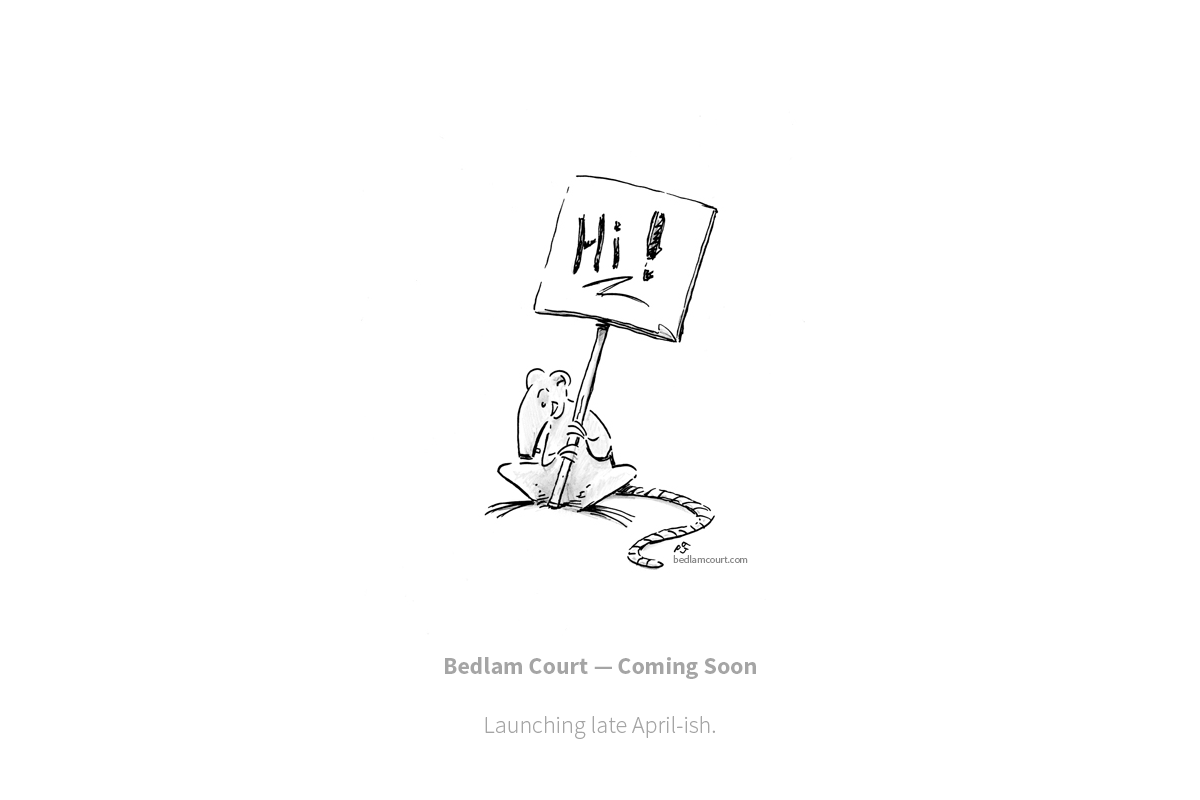
<style>
.page{position:relative;width:1200px;height:800px;background:#ffffff}
.page>*{position:absolute;margin:0}
.t1{font:24px "SourceSansPro-Bold";color:#a5a5a5}
.t2{font:24px "SourceSansPro-Light";color:#a5a5a5}
</style>
<div class="page">
<p class="t1" style="left:445px;top:657px;width:311px;height:22px">Bedlam Court — Coming Soon</p>
<p class="t2" style="left:485px;top:716px;width:230px;height:23px">Launching late April-ish.</p>
</div>
